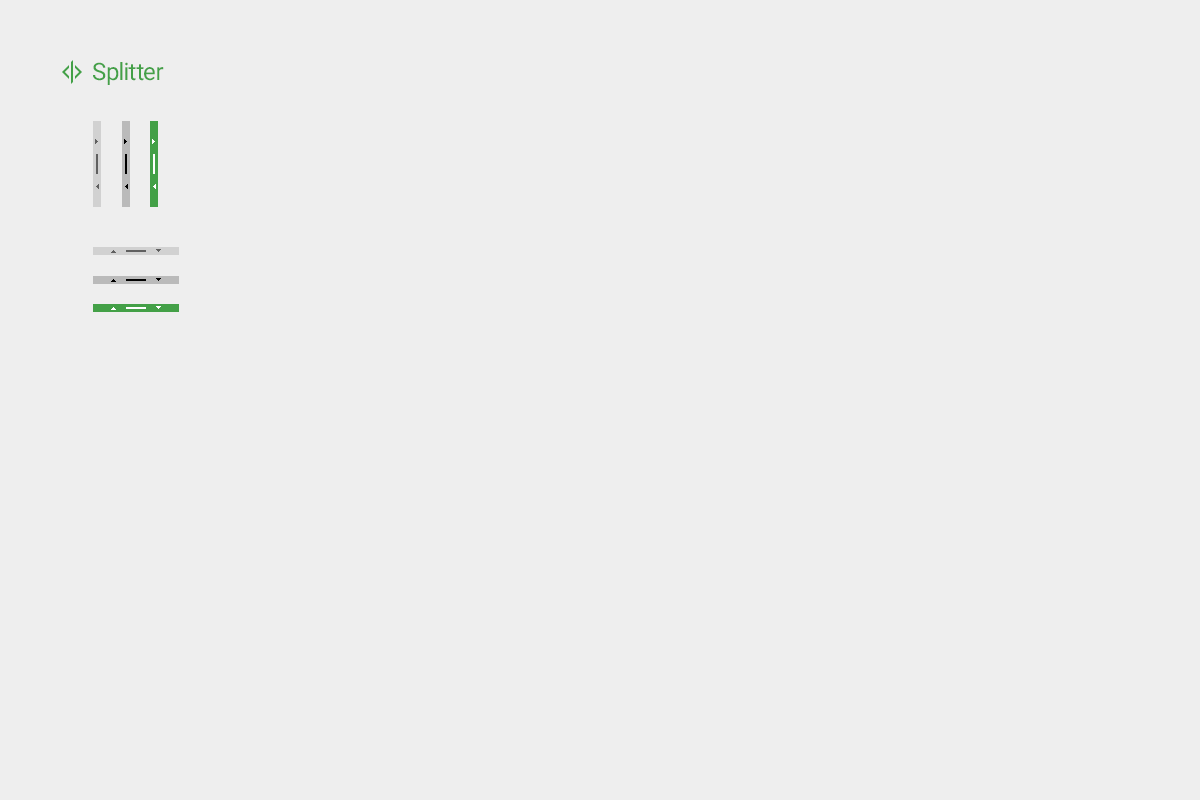
<style>
.page{position:relative;width:1200px;height:800px;background:#eeeeee}
.page>*{position:absolute;margin:0}
.t1{font:24px "Roboto-Regular";letter-spacing:-0.025em;color:#43a047}
</style>
<div class="page">
<p class="t1" style="left:93px;top:62px;width:71px;height:23px">Splitter</p>
</div>
